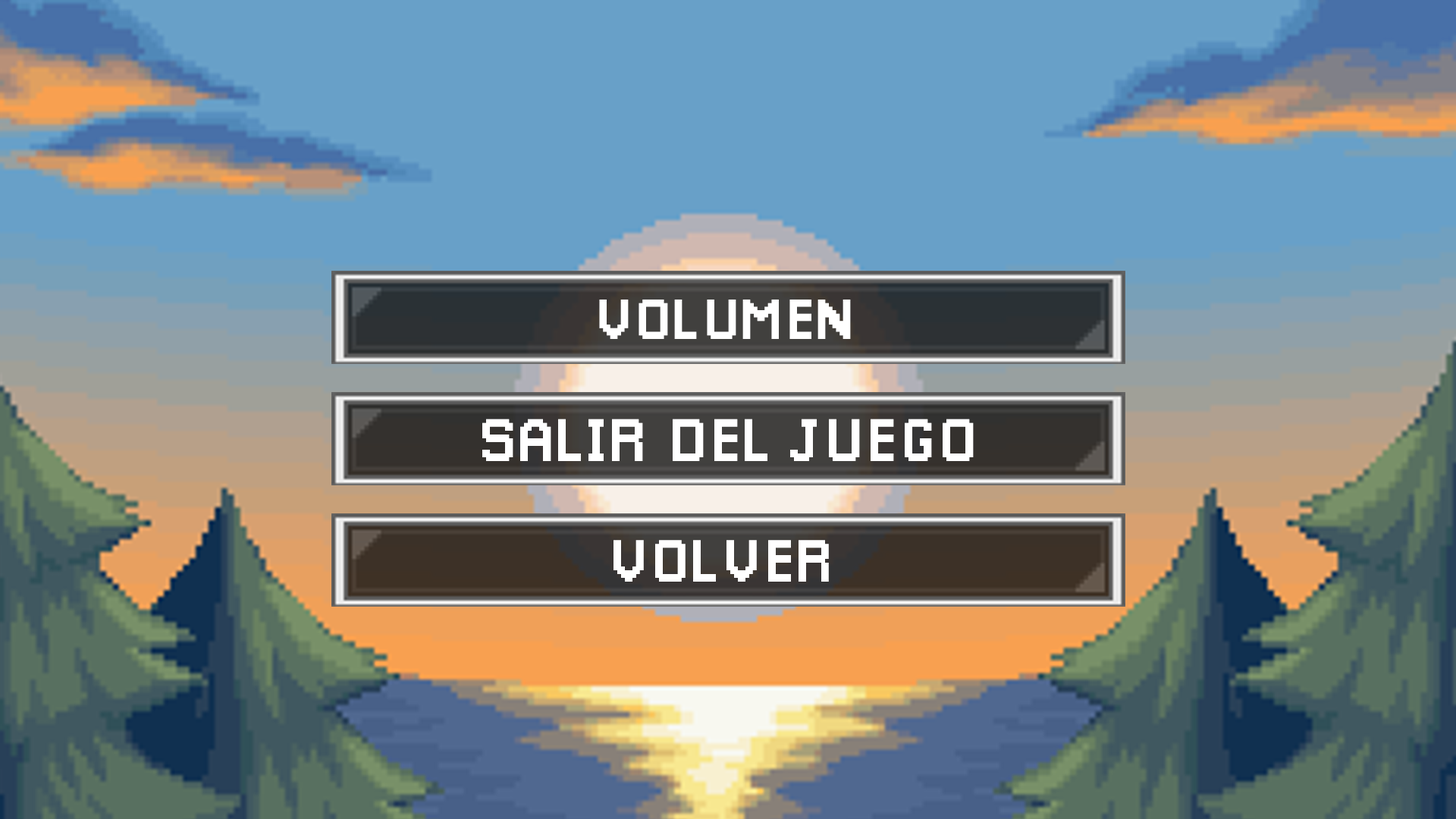
<style>
.page{position:relative;width:1456px;height:819px;background:#68a0c8}
.page>*{position:absolute;margin:0}
.t1{font:57.4px "Pixellari";color:#ffffff}
.t2{font:60.9px "Pixellari";color:#ffffff}
.t3{font:60.5px "Pixellari";color:#ffffff}
</style>
<div class="page">
<p class="t1" style="left:599px;top:300px;width:252px;height:39px">VOLUMEN</p>
<p class="t2" style="left:482px;top:419px;width:492px;height:42px">SALIR DEL JUEGO</p>
<p class="t3" style="left:613px;top:540px;width:216px;height:42px">VOLVER</p>
</div>
